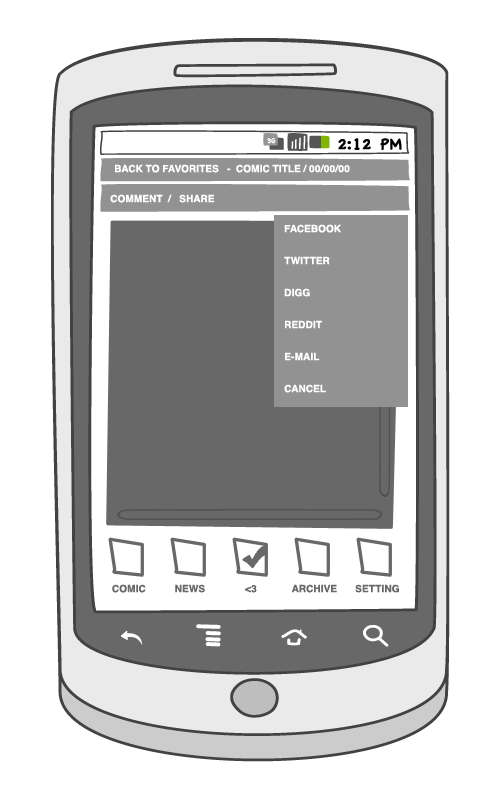
<style>
.page{position:relative;width:500px;height:800px;background:#ffffff}
.page>*{position:absolute;margin:0}
.t1{font:10px "Helvetica-Bold";color:#ffffff;text-transform:uppercase}
.t2{font:10px/32px "Helvetica-Bold";color:#ffffff;text-transform:uppercase}
.t3{font:10px "Helvetica-Bold";color:#686868;text-transform:uppercase}
</style>
<div class="page">
<p class="t1" style="left:115px;top:164px;width:235px;height:9px">Back to Favorites   -  Comic title / 00/00/00</p>
<p class="t1" style="left:110px;top:194px;width:105px;height:9px">Comment  /   share</p>
<p class="t2" style="left:284px;top:224px;width:58px;height:169px">facebook<br>twitter<br>digg<br>reddit<br>e-mail<br>cancel</p>
<p class="t3" style="left:112px;top:584px;width:34px;height:9px">COmic</p>
<p class="t3" style="left:175px;top:584px;width:30px;height:9px">News</p>
<p class="t3" style="left:245px;top:585px;width:12px;height:8px">&lt;3</p>
<p class="t3" style="left:291px;top:584px;width:46px;height:9px">Archive</p>
<p class="t3" style="left:355px;top:584px;width:44px;height:9px">Setting</p>
</div>
